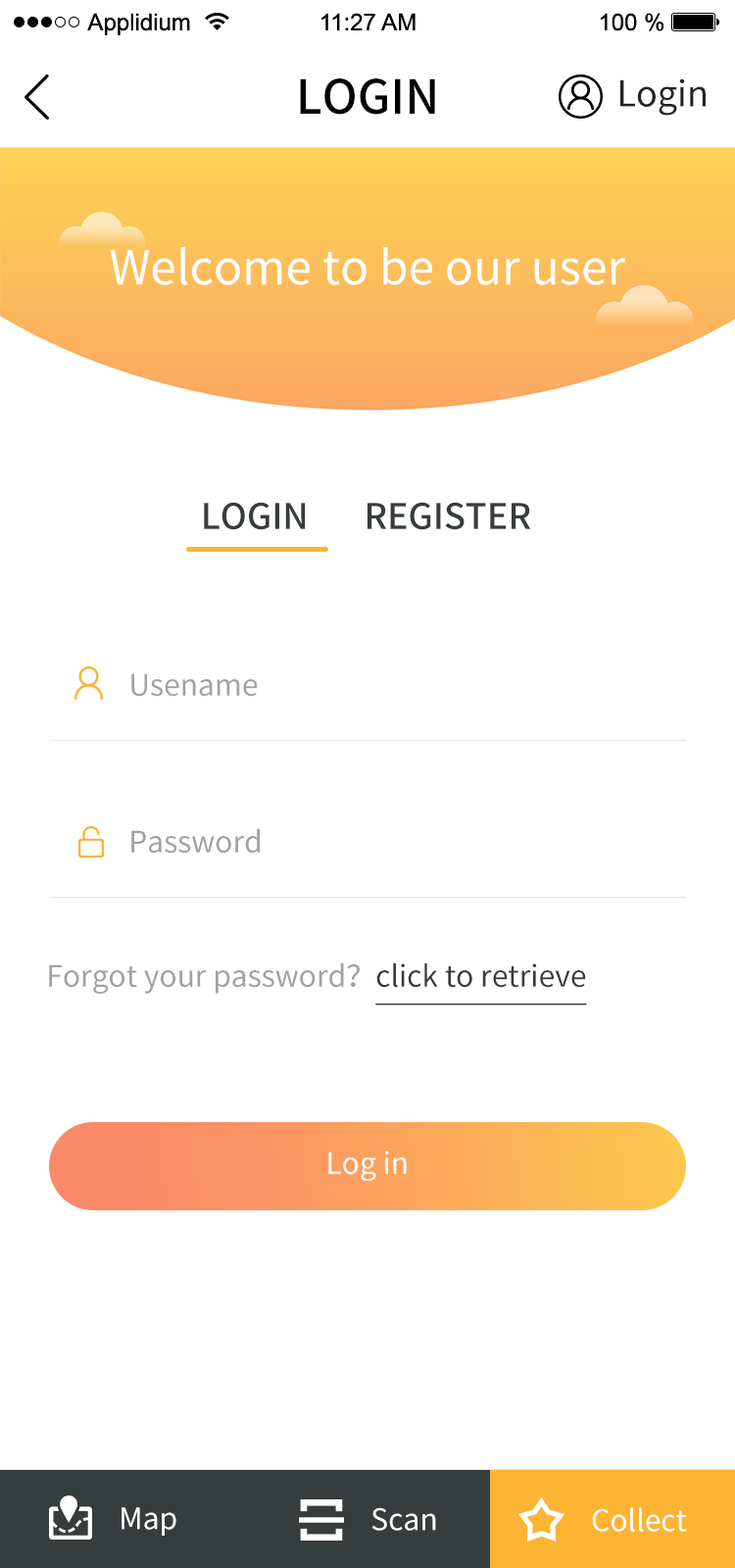
<style>
.page{position:relative;width:735px;height:1568px;background:#ffffff}
.page>*{position:absolute;margin:0}
.t1{font:47px "SourceHanSansCN-Medium";color:#010101;text-transform:uppercase}
.t2{font:35.3px "SourceHanSansCN-Regular";color:#222222}
.t3{font:47px "SourceHanSansCN-Regular";color:#ffffff}
.t4{font:35.3px "SourceHanSansCN-Medium";color:#373c3d;text-transform:uppercase}
.t5{font:29.4px "SourceHanSansCN-Regular";color:#a1a1a1}
.t6{font:29.4px "SourceHanSansCN-Regular";color:#373c3d;text-decoration:underline}
.t7{font:29.4px "SourceHanSansCN-Regular";color:#ffffff}
</style>
<div class="page">
<p class="t1" style="left:300px;top:78px;width:135px;height:37px">login</p>
<p class="t2" style="left:620px;top:78px;width:86px;height:38px">Login</p>
<p class="t3" style="left:110px;top:247px;width:516px;height:38px">Welcome to be our user</p>
<p class="t4" style="left:204px;top:502px;width:327px;height:28px">Login       Register</p>
<p class="t5" style="left:131px;top:673px;width:127px;height:24px">Usename</p>
<p class="t5" style="left:131px;top:829px;width:129px;height:25px">Password</p>
<p class="t5" style="left:49px;top:963px;width:538px;height:42px">Forgot your password？<span class="t6">click to retrieve</span></p>
<p class="t7" style="left:328px;top:1151px;width:79px;height:30px">Log in</p>
<p class="t7" style="left:122px;top:1507px;width:54px;height:29px">Map</p>
<p class="t7" style="left:371px;top:1507px;width:65px;height:24px">Scan</p>
<p class="t7" style="left:593px;top:1507px;width:94px;height:25px">Collect</p>
</div>
